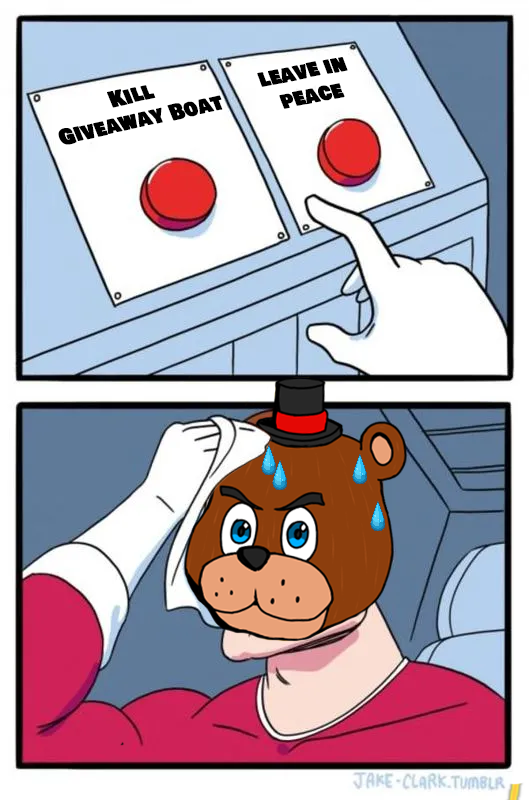
<style>
.page{position:relative;width:529px;height:800px;background:#ffffff}
.page>*{position:absolute;margin:0}
.t1{font:21.6px "BowlbyOneSC-Regular";color:#000000;font-weight:bold;scale:0.87 1}
</style>
<div class="page">
<p class="t1" style="left:257px;top:57px;width:91px;height:52px;text-align:center;rotate:-11deg">leave in<br>peace</p>
<p class="t1" style="left:58px;top:85px;width:165px;height:60px;text-align:center;rotate:-13deg">Kill<br>Giveaway Boat</p>
</div>
